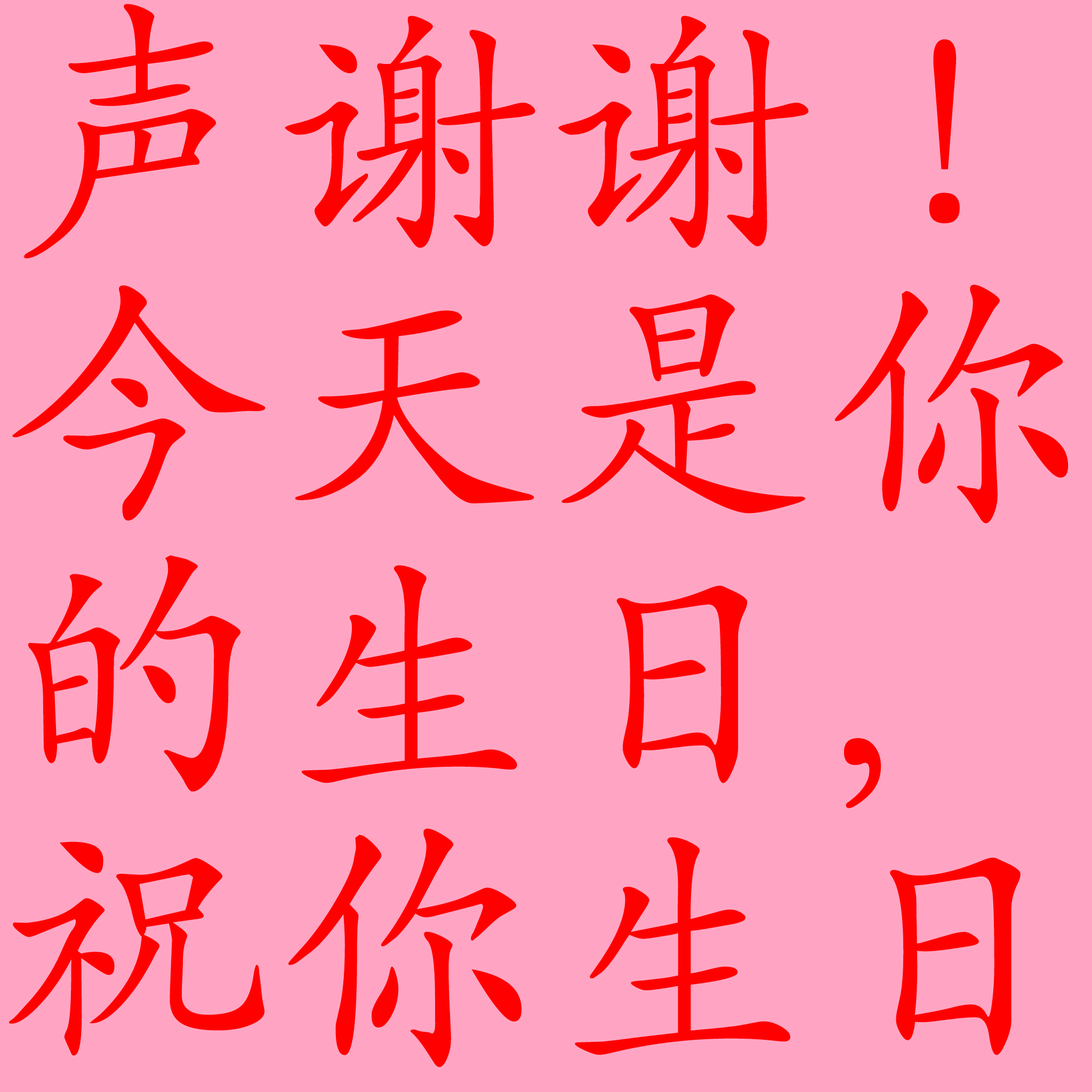
<style>
.page{position:relative;width:1092px;height:1092px;background:#ffa5c3}
.page>*{position:absolute;margin:0}
.t1{font:266.6px/271.9px "SIL-Kai-Reg-Jian";letter-spacing:0.025em;color:#ff0000}
</style>
<div class="page">
<p class="t1" style="left:9px;top:4px;width:1060px;height:1063px">声谢谢！<br>今天是你<br>的生日，<br>祝你生日</p>
</div>
